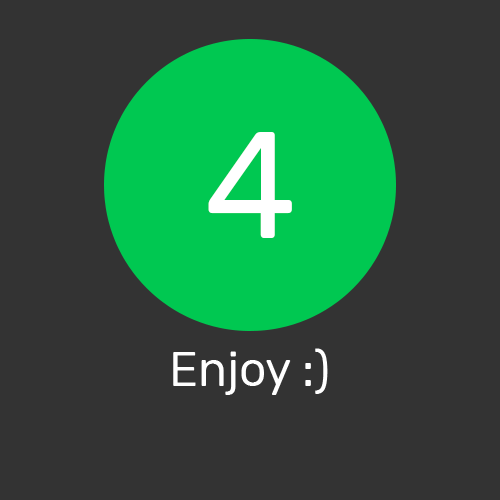
<style>
.page{position:relative;width:500px;height:500px;background:#333333}
.page>*{position:absolute;margin:0}
.t1{font:150px "Rubik-Regular";color:#ffffff}
.t2{font:48px "Rubik-Regular";color:#ffffff}
</style>
<div class="page">
<p class="t1" style="left:208px;top:132px;width:84px;height:106px">4</p>
<p class="t2" style="left:173px;top:348px;width:155px;height:47px">Enjoy :)</p>
</div>
